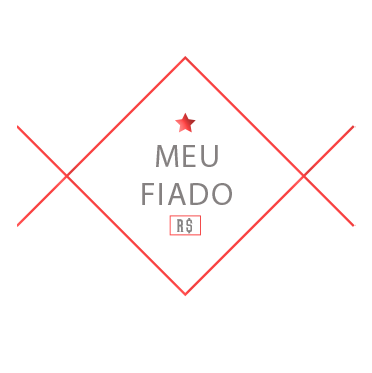
<style>
.page{position:relative;width:372px;height:373px;background:#ffffff}
.page>*{position:absolute;margin:0}
.t1{font:32.4px "Antonio-Light";letter-spacing:0.05em;color:#858181}
.t2{font:16.5px "Nawaitu";letter-spacing:0.1em;color:#868383}
</style>
<div class="page">
<p class="t1" style="left:142px;top:145px;width:90px;height:60px;text-align:center">MEU<br>FIADO</p>
<p class="t2" style="left:177px;top:218px;width:16px;height:16px">R$</p>
</div>
